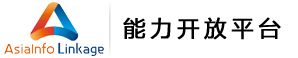
<style>
.page{position:relative;width:298px;height:58px;background:#ffffff}
.page>*{position:absolute;margin:0}
.t1{font:22px "MicrosoftYaHei";letter-spacing:0.2em;color:#000000;font-weight:bold}
</style>
<div class="page">
<p class="t1" style="left:123px;top:17px;width:158px;height:23px">能力开放平台</p>
</div>
